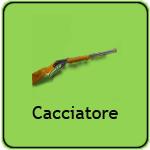
<style>
.page{position:relative;width:150px;height:150px;background:#92d353}
.page>*{position:absolute;margin:0}
.t1{font:18px "TrebuchetMS";color:#0b0b0b}
</style>
<div class="page">
<p class="t1" style="left:32px;top:106px;width:86px;height:13px">Cacciatore</p>
</div>
